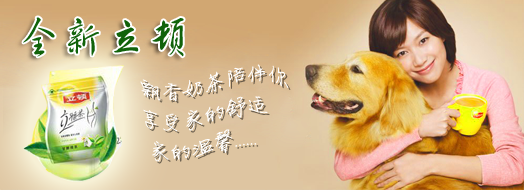
<style>
.page{position:relative;width:524px;height:190px}
.page>*{position:absolute;margin:0}
.t1{font:48px "GJJHCJW--GB1-0";letter-spacing:-0.075em;color:#10620a}
.t2{font:23.2px/30.9px "FZJLJW--GB1-0";letter-spacing:-0.075em;color:#ffffff}
.t3{font:23.2px/30.9px "FZJLJW--GB1-0";letter-spacing:-0.075em}
</style>
<div class="page">
<p class="t1" style="left:23px;top:17px;width:161px;height:40px">全新立顿</p>
<p class="t2" style="left:140px;top:64px;width:149px;height:98px">飘香奶茶陪伴你<br>享受家的舒适<br>  家的温馨......</p>
<p class="t3" style="left:142px;top:66px;width:149px;height:98px">飘香奶茶陪伴你<br>享受家的舒适<br>  家的温馨......</p>
</div>
